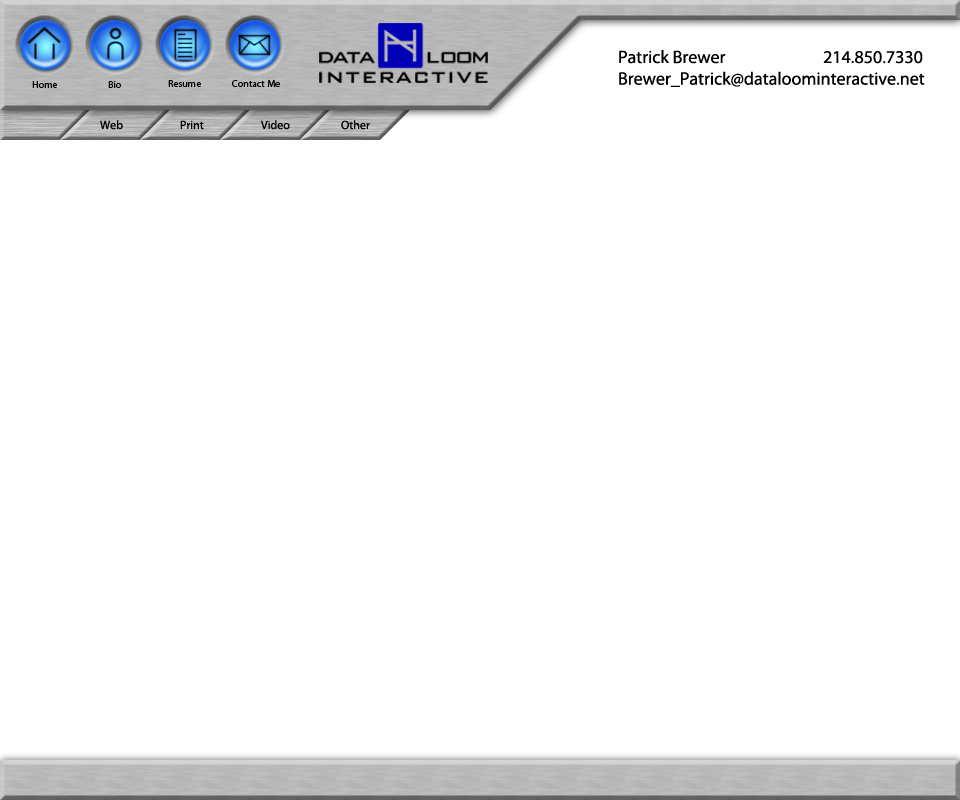
<style>
.page{position:relative;width:960px;height:800px;background:#ffffff}
.page>*{position:absolute;margin:0}
.t1{font:18px "MyriadPro-Regular";color:#000000}
.t2{font:10px "MyriadPro-Regular";color:#000000}
.t3{font:12px "MyriadPro-Regular";color:#000000}
</style>
<div class="page">
<p class="t1" style="left:619px;top:50px;width:306px;height:37px">Patrick Brewer                  214.850.7330<br>Brewer_Patrick@dataloominteractive.net</p>
<p class="t2" style="left:32px;top:81px;width:25px;height:7px">Home</p>
<p class="t2" style="left:108px;top:81px;width:13px;height:7px">Bio</p>
<p class="t2" style="left:168px;top:80px;width:33px;height:7px">Resume</p>
<p class="t2" style="left:232px;top:80px;width:48px;height:7px">Contact Me</p>
<p class="t3" style="left:100px;top:120px;width:23px;height:10px">Web</p>
<p class="t3" style="left:180px;top:120px;width:24px;height:10px">Print</p>
<p class="t3" style="left:261px;top:120px;width:29px;height:10px">Video</p>
<p class="t3" style="left:341px;top:120px;width:29px;height:10px">Other</p>
</div>
